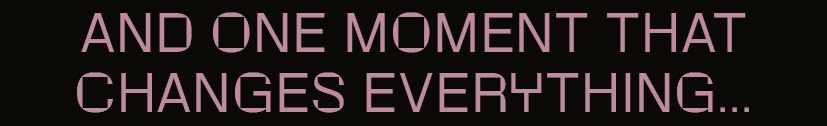
<style>
.page{position:relative;width:827px;height:126px;background:#0a0905}
.page>*{position:absolute;margin:0}
.t1{font:50.2px "RotontoTrial-Light";letter-spacing:0.05em;color:#bd8b99;text-transform:uppercase}
</style>
<div class="page">
<p class="t1" style="left:77px;top:12px;width:672px;height:101px;text-align:center">And one moment that changes everything...</p>
</div>
